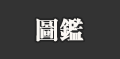
<style>
.page{position:relative;width:120px;height:59px;background:#333333}
.page>*{position:absolute;margin:0}
.t1{font:24px "RyuminPr6N-ExBold";color:#fbf8f3;font-weight:bold}
</style>
<div class="page">
<p class="t1" style="left:36px;top:18px;width:48px;height:24px">圖鑑</p>
</div>
